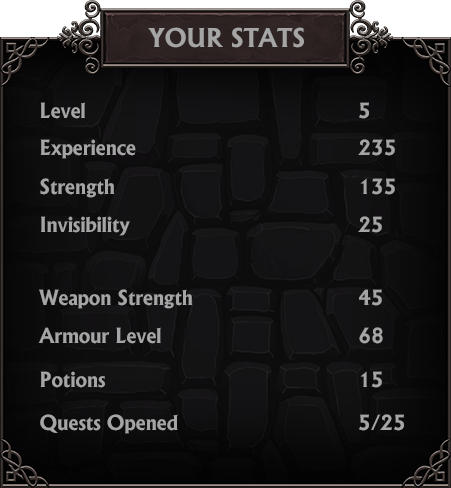
<style>
.page{position:relative;width:451px;height:488px}
.page>*{position:absolute;margin:0}
.t1{font:25px "AlbertusBold-Regular";color:#a5a5a5}
.t2{font:20px "AlbertusBold-Regular";color:#a5a5a5}
</style>
<div class="page">
<p class="t1" style="left:148px;top:27px;width:156px;height:21px">YOUR STATS</p>
<p class="t2" style="left:40px;top:102px;width:329px;height:17px">Level       5</p>
<p class="t2" style="left:40px;top:139px;width:355px;height:20px">Experience     235</p>
<p class="t2" style="left:40px;top:178px;width:355px;height:20px">Strength       135</p>
<p class="t2" style="left:41px;top:216px;width:341px;height:20px">Invisibility      25</p>
<p class="t2" style="left:39px;top:289px;width:343px;height:20px">Weapon Strength     45</p>
<p class="t2" style="left:38px;top:327px;width:345px;height:17px">Armour Level     68</p>
<p class="t2" style="left:40px;top:371px;width:342px;height:17px">Potions       15</p>
<p class="t2" style="left:40px;top:414px;width:364px;height:20px">Quests Opened    5/25</p>
</div>
